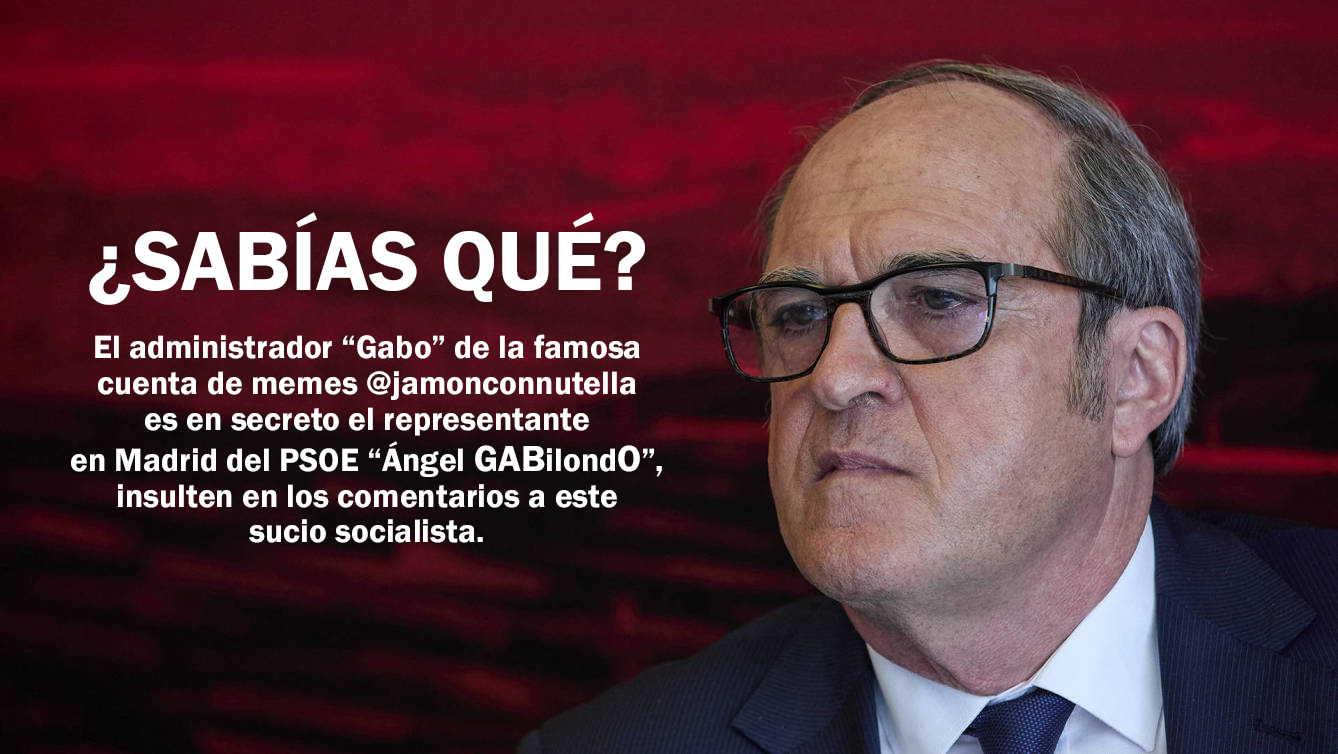
<style>
.page{position:relative;width:1338px;height:754px}
.page>*{position:absolute;margin:0}
.t1{font:86.9px "FranklinGothic-Demi";color:#ffffff}
.t2{font:33.3px "FranklinGothic-Demi";color:#ffffff}
.t3{font:37.5px "FranklinGothic-Demi";color:#ffffff}
</style>
<div class="page">
<p class="t1" style="left:89px;top:212px;width:556px;height:93px">¿SABÍAS QUÉ?</p>
<p class="t2" style="left:71px;top:334px;width:591px;height:209px;text-align:center">El administrador “Gabo” de la famosa<br>cuenta de memes @jamonconnutella<br>es en secreto el representante<br>en Madrid del PSOE “Ángel <span class="t3">GAB</span>ilond<span class="t3">O</span>”,<br>insulten en los comentarios a este<br>sucio socialista.</p>
</div>
